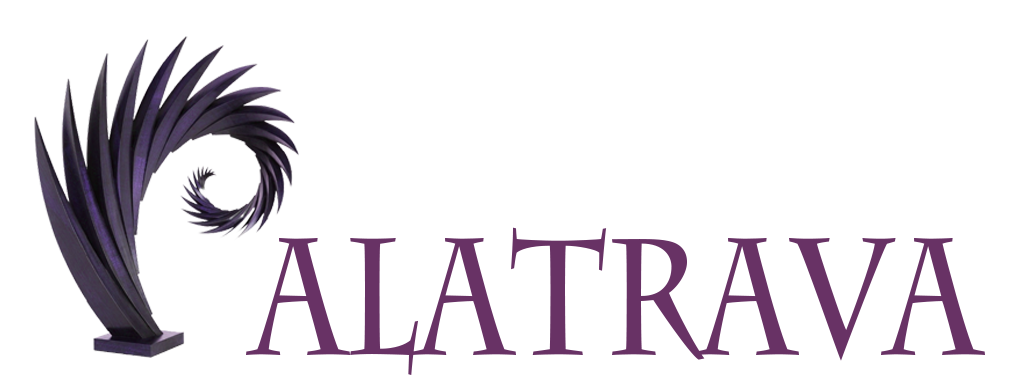
<style>
.page{position:relative;width:1024px;height:391px;background:#ffffff}
.page>*{position:absolute;margin:0}
.t1{font:163.9px "CharlemagneStd-Bold";color:#683265;scale:0.78 1}
</style>
<div class="page">
<p class="t1" style="left:246px;top:227px;width:739px;height:148px">alatrava</p>
</div>
